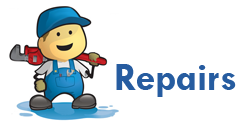
<style>
.page{position:relative;width:250px;height:125px;background:#ffffff}
.page>*{position:absolute;margin:0}
.t1{font:39.5px "TwCenMT-Bold";color:#265ca0}
</style>
<div class="page">
<p class="t1" style="left:116px;top:64px;width:120px;height:33px">Repairs</p>
</div>
